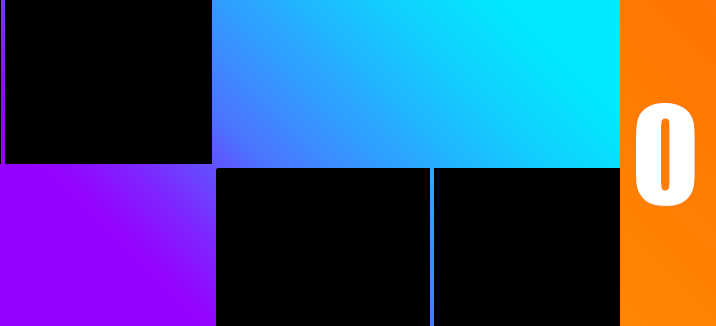
<style>
.page{position:relative;width:716px;height:326px;background:#000000}
.page>*{position:absolute;margin:0}
.t1{font:125px "Impact";color:#ffffff}
</style>
<div class="page">
<p class="t1" style="left:636px;top:103px;width:59px;height:103px">0</p>
</div>
